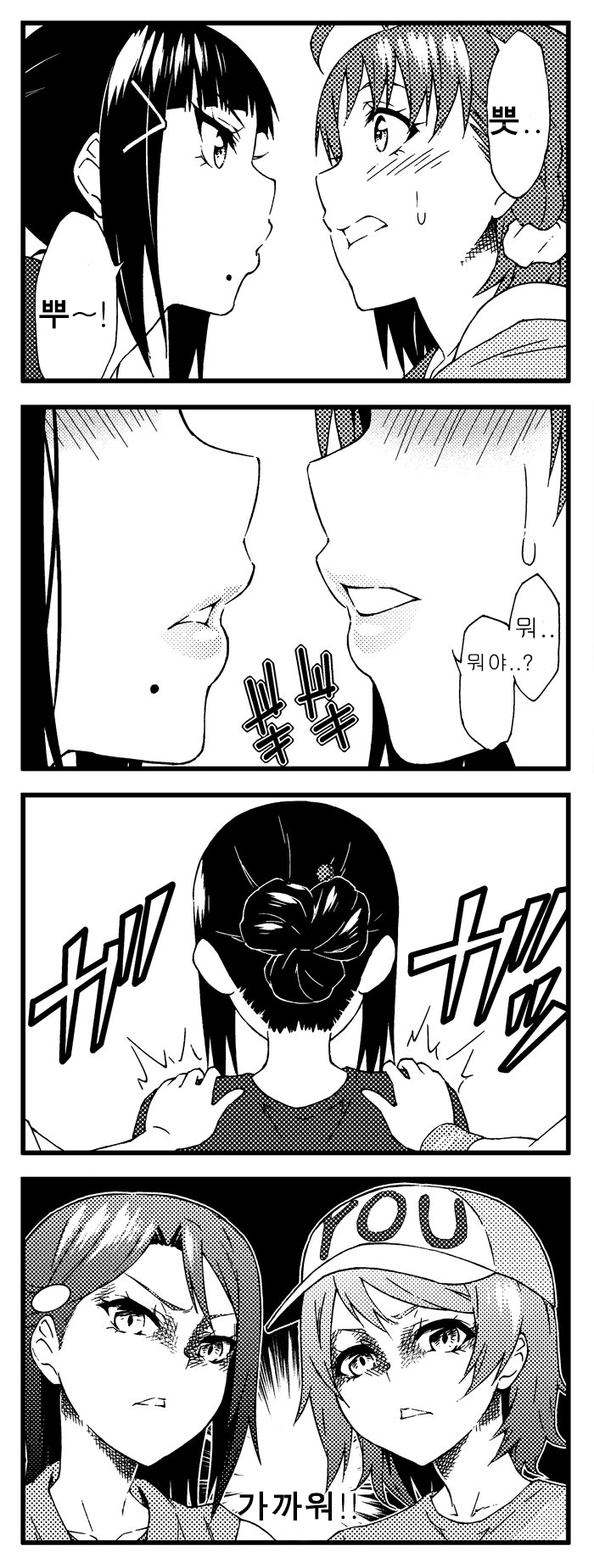
<style>
.page{position:relative;width:594px;height:1568px;background:#ffffff}
.page>*{position:absolute;margin:0}
.t1{font:33.9px "Gulim";color:#000000}
.t2{font:33.9px "MJemokGothic";color:#000000}
.t3{font:25.4px "Gulim";color:#000000}
.t4{font:21.2px "Gulim";color:#000000}
.t5{font:33.9px "MJemokGothic";color:#030303}
.t6{font:33.9px "Gulim";color:#030303}
</style>
<div class="page">
<p class="t1" style="left:488px;top:106px;width:52px;height:30px"><span class="t2">뿟</span>..</p>
<p class="t1" style="left:39px;top:299px;width:66px;height:30px"><span class="t2">뿌</span>~!</p>
<p class="t3" style="left:516px;top:617px;width:38px;height:22px">뭐..</p>
<p class="t4" style="left:466px;top:653px;width:67px;height:19px">뭐야..?</p>
<p class="t5" style="left:237px;top:1491px;width:119px;height:30px">가까워<span class="t6">!!</span></p>
</div>
